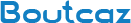
<style>
.page{position:relative;width:131px;height:23px;background:#ffffff}
.page>*{position:absolute;margin:0}
.t1{font:33.5px "Blue";color:#127fc2}
</style>
<div class="page">
<p class="t1" style="left:0px;top:0px;width:131px;height:23px">Boutcaz</p>
</div>
